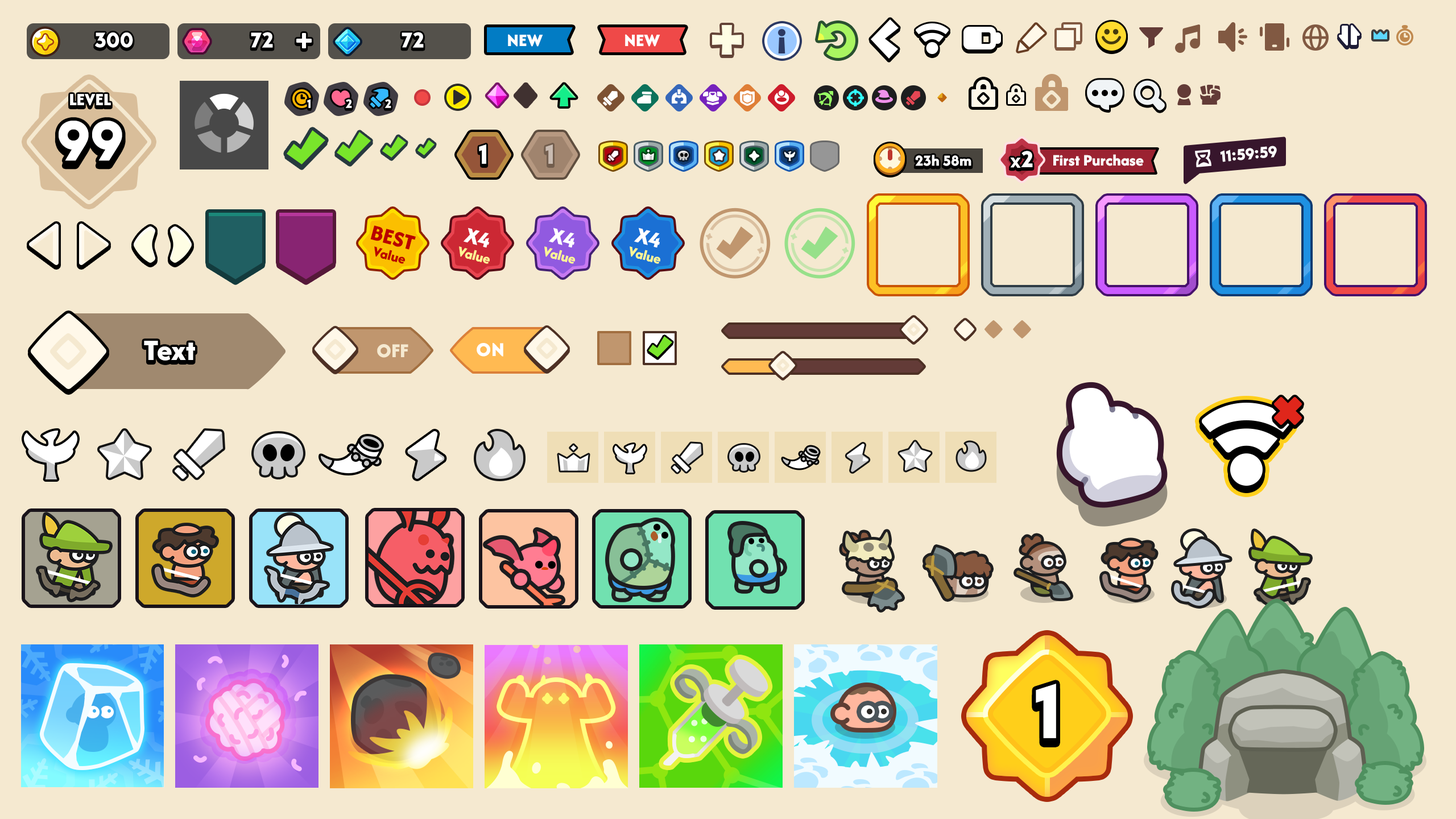
<style>
.page{position:relative;width:1456px;height:819px;background:#f5e9d0}
.page>*{position:absolute;margin:0}
.t1{font:22.2px "LTAvocado-Bold";color:#ffffff}
.t2{font:18.2px "AfacadFlux-ExtraBold";color:#ffffff;text-transform:uppercase}
.t3{font:18px "AfacadFlux-ExtraBold";color:#ffffff;text-transform:uppercase}
.t4{font:12.5px "LTAvocado-Bold";color:#ffffff;text-transform:uppercase}
.t5{font:58.5px "LTAvocado-Bold";color:#ffffff;text-transform:uppercase}
.t6{font:28.4px "LTAvocado-Bold";color:#ffffff;text-transform:uppercase}
.t7{font:28.4px "LTAvocado-Bold";color:#c9bbb1;text-transform:uppercase}
.t8{font:16.4px "LTAvocado-Bold";letter-spacing:-0.01em;color:#ffffff}
.t9{font:15.9px "AfacadFlux-ExtraBold";color:#ffffff}
.t10{font:21.5px "LTAvocado-Bold";letter-spacing:-0.025em;color:#ffffff}
.t11{font:23.7px "LTAvocado-Bold";letter-spacing:-0.025em;color:#ffffff}
.t12{font:16.5px "AfacadFlux-ExtraBold";color:#ffffff}
.t13{font:22.7px "AfacadFlux-ExtraBold";color:#ba0000;text-transform:uppercase}
.t14{font:22.7px "AfacadFlux-ExtraBold";color:#ffffff;text-transform:uppercase}
.t15{font:14.8px "AfacadFlux-ExtraBold";color:#ba0000}
.t16{font:14.8px "AfacadFlux-ExtraBold";color:#fff695}
.t17{font:30.7px "AfacadFlux-ExtraBold";color:#ffffff}
.t18{font:20.5px "AfacadFlux-ExtraBold";color:#f5e9d0;text-transform:uppercase}
.t19{font:20.5px "AfacadFlux-ExtraBold";color:#ffffff;text-transform:uppercase}
.t20{font:79.6px "LTAvocado-Bold";color:#ffffff;text-transform:uppercase}
</style>
<div class="page">
<p class="t1" style="left:95px;top:32px;width:38px;height:16px">300</p>
<p class="t1" style="left:251px;top:32px;width:22px;height:16px">72</p>
<p class="t1" style="left:402px;top:32px;width:22px;height:16px">72</p>
<p class="t2" style="left:508px;top:34px;width:35px;height:13px">New</p>
<p class="t2" style="left:625px;top:34px;width:35px;height:13px">New</p>
<p class="t3" style="left:70px;top:94px;width:41px;height:12px">Level</p>
<p class="t4" style="left:307px;top:99px;width:4px;height:9px">1</p>
<p class="t4" style="left:345px;top:99px;width:7px;height:9px">2</p>
<p class="t4" style="left:384px;top:99px;width:7px;height:9px">2</p>
<p class="t5" style="left:59px;top:121px;width:63px;height:40px">99</p>
<p class="t6" style="left:479px;top:144px;width:7px;height:20px">1</p>
<p class="t7" style="left:545px;top:144px;width:8px;height:20px">1</p>
<p class="t8" style="left:1220px;top:146px;width:57px;height:16px;rotate:-5deg">11:59:59</p>
<p class="t9" style="left:915px;top:155px;width:56px;height:11px">23h 58m</p>
<p class="t10" style="left:1010px;top:151px;width:23px;height:17px">x<span class="t11">2</span></p>
<p class="t12" style="left:1053px;top:154px;width:91px;height:12px">First Purchase</p>
<p class="t13" style="left:370px;top:225px;width:46px;height:25px;rotate:15deg">Best</p>
<p class="t14" style="left:463px;top:227px;width:26px;height:21px;rotate:15deg">x4</p>
<p class="t14" style="left:548px;top:227px;width:26px;height:21px;rotate:15deg">x4</p>
<p class="t14" style="left:634px;top:227px;width:26px;height:21px;rotate:15deg">x4</p>
<p class="t15" style="left:374px;top:246px;width:31px;height:18px;rotate:15deg">Value</p>
<p class="t16" style="left:459px;top:246px;width:31px;height:18px;rotate:15deg">Value</p>
<p class="t16" style="left:544px;top:246px;width:31px;height:18px;rotate:15deg">Value</p>
<p class="t16" style="left:630px;top:246px;width:30px;height:18px;rotate:15deg">Value</p>
<p class="t17" style="left:144px;top:341px;width:51px;height:20px">Text</p>
<p class="t18" style="left:377px;top:344px;width:31px;height:14px">OFF</p>
<p class="t19" style="left:477px;top:343px;width:26px;height:14px">ON</p>
<p class="t20" style="left:1036px;top:684px;width:20px;height:54px">1</p>
</div>
